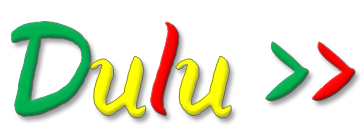
<style>
.page{position:relative;width:363px;height:136px;background:#ffffff}
.page>*{position:absolute;margin:0}
.t1{font:117.3px "Corman-Brush";color:#00b050}
.t2{font:117.3px "Corman-Brush";color:#ffff00}
.t3{font:117.3px "Corman-Brush";color:#ff0000}
</style>
<div class="page">
<p class="t1" style="left:11px;top:21px;width:344px;height:97px">D<span class="t2">u</span><span class="t3">l</span><span class="t2">u </span>&gt;<span class="t3">&gt;</span></p>
</div>
